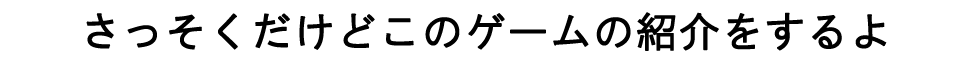
<style>
.page{position:relative;width:972px;height:69px;background:#ffffff}
.page>*{position:absolute;margin:0}
.t1{font:41.7px "HGGothicM";color:#000000;font-weight:bold}
</style>
<div class="page">
<p class="t1" style="left:86px;top:12px;width:801px;height:39px">さっそくだけどこのゲームの紹介をするよ</p>
</div>
